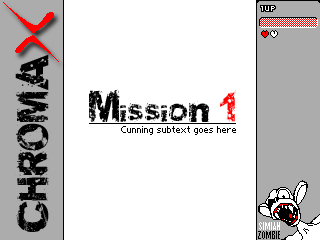
<style>
.page{position:relative;width:320px;height:240px;background:#ffffff}
.page>*{position:absolute;margin:0}
.t1{font:36px "SoulMission";color:#000000}
.t2{font:35.1px "SoulMission";color:#000000}
.t3{font:35.1px "SoulMission";color:#ff0000}
.t4{font:12px "Photoshop Small";color:#000000}
.t5{font:10px "AgencyFB-Reg";color:#ffffff}
.t6{font:10px "AgencyFB-Reg";color:#000000}
</style>
<div class="page">
<p class="t1" style="left:15px;top:54px;width:34px;height:178px;rotate:-90deg">CHROMA</p>
<p class="t2" style="left:89px;top:89px;width:147px;height:35px">Mission <span class="t3">1</span></p>
<p class="t4" style="left:121px;top:126px;width:115px;height:9px">Cunning subtext goes here</p>
<p class="t5" style="left:259px;top:222px;width:21px;height:8px">SIMIAN</p>
<p class="t6" style="left:258px;top:231px;width:22px;height:8px">ZOMBIE</p>
</div>
